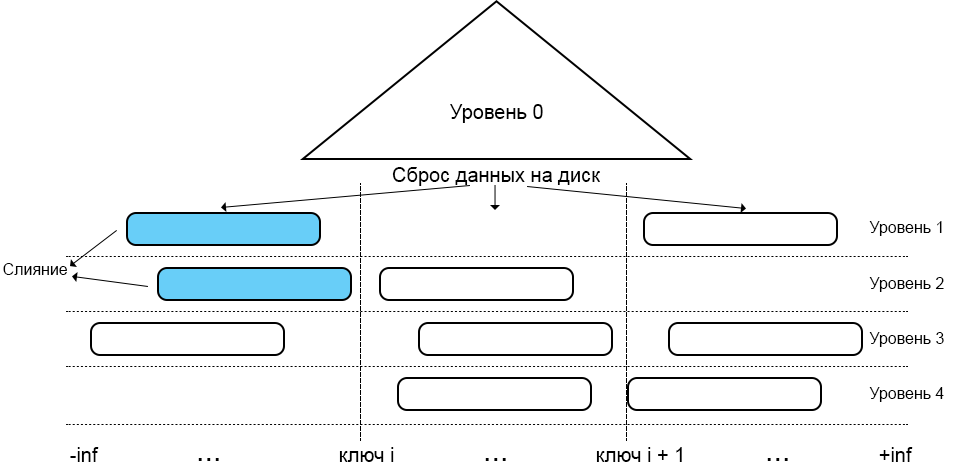
<style>
.page{position:relative;width:959px;height:466px;background:#ffffff}
.page>*{position:absolute;margin:0}
.t1{font:20px "ArialMT";color:#000000}
.t2{font:16px "ArialMT";color:#000000}
.t3{font:30px "ArialMT";color:#000000}
</style>
<div class="page">
<p class="t1" style="left:450px;top:104px;width:93px;height:19px">Уровень 0</p>
<p class="t1" style="left:392px;top:167px;width:208px;height:19px">Сброс данных на диск</p>
<p class="t2" style="left:869px;top:221px;width:73px;height:15px">Уровень 1</p>
<p class="t2" style="left:3px;top:263px;width:64px;height:12px">Слияние</p>
<p class="t2" style="left:869px;top:277px;width:75px;height:15px">Уровень 2</p>
<p class="t2" style="left:869px;top:332px;width:75px;height:15px">Уровень 3</p>
<p class="t2" style="left:869px;top:387px;width:75px;height:15px">Уровень 4</p>
<p class="t1" style="left:70px;top:447px;width:29px;height:15px">-inf</p>
<p class="t1" style="left:339px;top:447px;width:55px;height:15px">ключ i</p>
<p class="t1" style="left:596px;top:447px;width:86px;height:15px">ключ i + 1</p>
<p class="t1" style="left:879px;top:447px;width:34px;height:15px">+inf</p>
<p class="t3" style="left:198px;top:458px;width:21px;height:3px">...</p>
<p class="t3" style="left:485px;top:458px;width:21px;height:3px">...</p>
<p class="t3" style="left:767px;top:458px;width:21px;height:3px">...</p>
</div>
